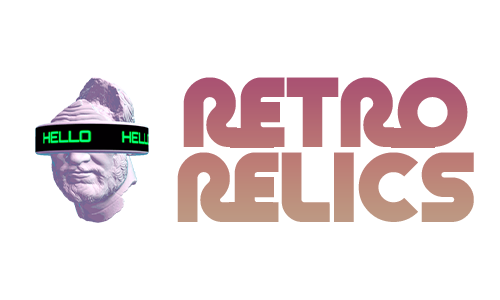
<style>
.page{position:relative;width:500px;height:300px;background:#ffffff}
.page>*{position:absolute;margin:0}
.t1{font:71.3px "RetroMonoWide";color:#b16272}
.t2{font:71.3px "RetroMonoWide";color:#bd8a7b}
</style>
<div class="page">
<p class="t1" style="left:183px;top:77px;width:285px;height:70px">RETRO</p>
<p class="t2" style="left:177px;top:152px;width:297px;height:70px">RELICS</p>
</div>
